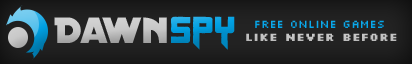
<style>
.page{position:relative;width:412px;height:64px}
.page>*{position:absolute;margin:0}
.t1{font:39.4px "DistantGalaxy";color:#c8c8c8}
.t2{font:37.3px "Origicide"}
.t3{font:12px "Silkscreen";color:#00a4e9}
.t4{font:12px "Silkscreen-Bold";color:#c8c8c8}
</style>
<div class="page">
<p class="t1" style="left:54px;top:17px;width:113px;height:26px">Dawn</p>
<p class="t2" style="left:171px;top:16px;width:64px;height:34px">Spy</p>
<p class="t3" style="left:255px;top:20px;width:129px;height:8px">Free online games</p>
<p class="t4" style="left:246px;top:33px;width:151px;height:8px">Like Never Before</p>
</div>
